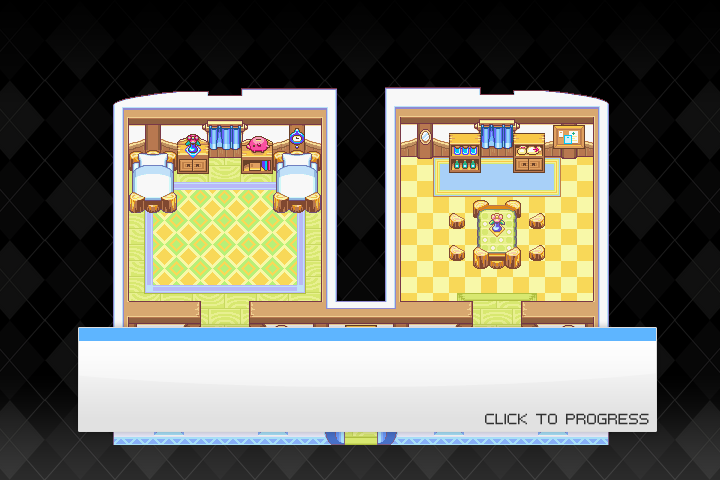
<style>
.page{position:relative;width:720px;height:480px}
.page>*{position:absolute;margin:0}
.t1{font:12px "PFTempestaSevenExtended";color:#313131}
</style>
<div class="page">
<p class="t1" style="left:485px;top:413px;width:164px;height:12px">CLICK TO PROGRESS</p>
</div>
